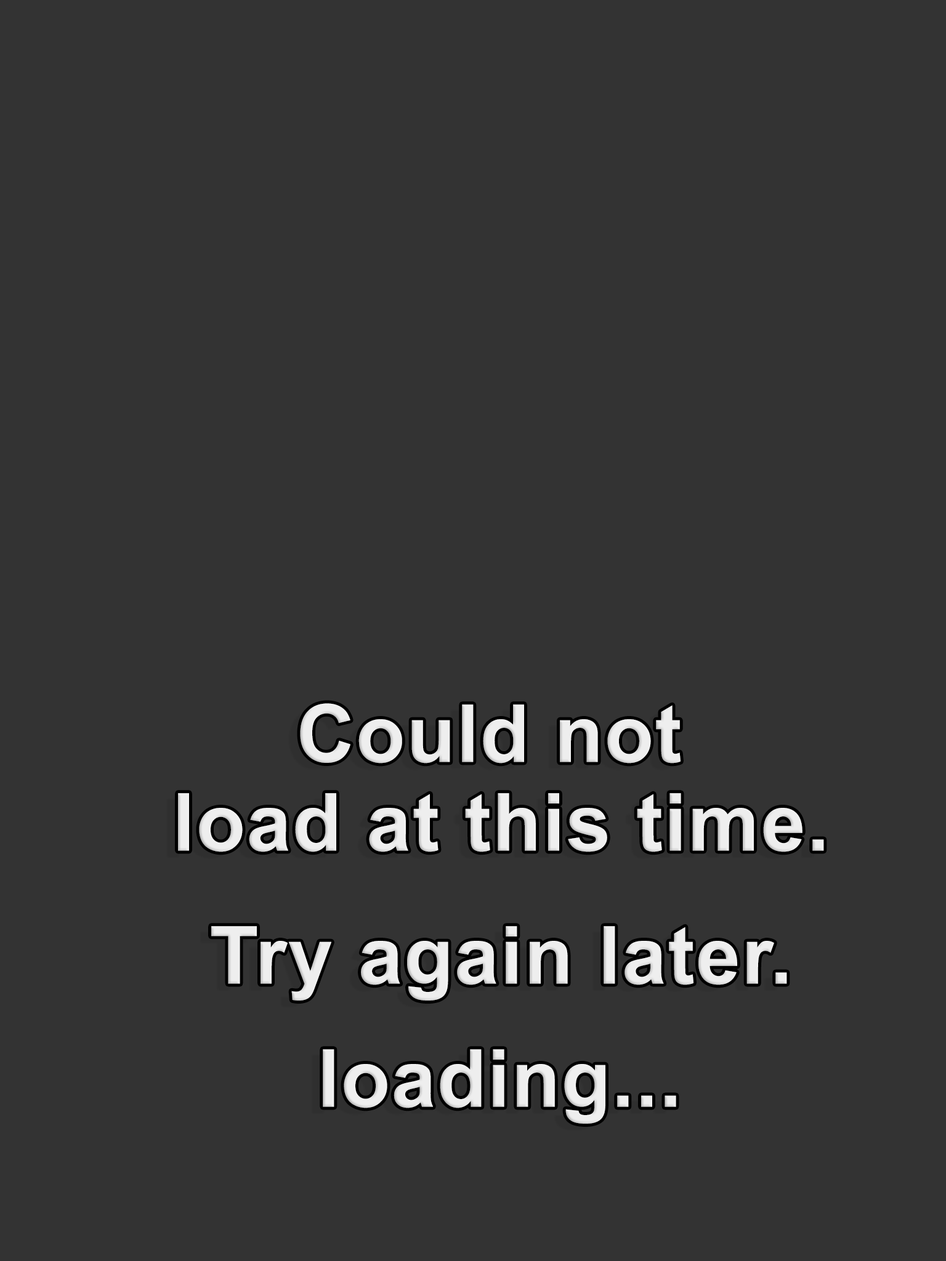
<style>
.page{position:relative;width:946px;height:1261px;background:#333333}
.page>*{position:absolute;margin:0}
.t1{font:80px/11.1px "Arial-BoldMT";letter-spacing:0.02em;color:#eeeeee}
.t2{font:80px "Arial-BoldMT";letter-spacing:0.02em;color:#eeeeee}
</style>
<div class="page">
<p class="t1" style="left:178px;top:703px;width:646px;height:297px;text-align:center">Could not <br><br><br><br><br><br><br><br>load at this time.<br><br><br><br><br><br><br><br><br><br><br><br>Try again later.</p>
<p class="t2" style="left:323px;top:1049px;width:353px;height:75px">loading...</p>
</div>
